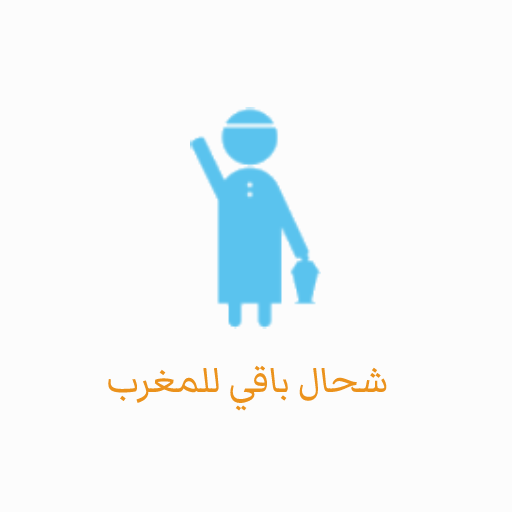
<style>
.page{position:relative;width:512px;height:512px;background:#fcfcfc}
.page>*{position:absolute;margin:0}
.t1{font:47px "MarkaziText-Regular";color:#eb921c}
</style>
<div class="page">
<p class="t1" style="left:108px;top:365px;width:279px;height:46px">شحال باقي للمغرب</p>
</div>
